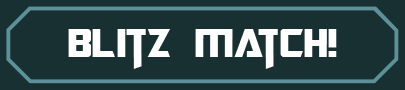
<style>
.page{position:relative;width:405px;height:90px;background:#193033}
.page>*{position:absolute;margin:0}
.t1{font:45px "TransformersMovie";letter-spacing:0.02em;color:#ffffff}
.t2{font:45px "TransformersMovie";color:#ffffff}
.t3{font:45px "TransformersMovie";letter-spacing:-0.1em;color:#ffffff}
</style>
<div class="page">
<p class="t1" style="left:68px;top:29px;width:269px;height:40px">bli<span class="t2">t</span>z m<span class="t3">a</span>tch!</p>
</div>
